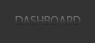
<style>
.page{position:relative;width:95px;height:43px;background:#333333}
.page>*{position:absolute;margin:0}
.t1{font:12px "MyriadPro-Regular"}
</style>
<div class="page">
<p class="t1" style="left:15px;top:16px;width:66px;height:9px">DASHBOARD</p>
</div>
